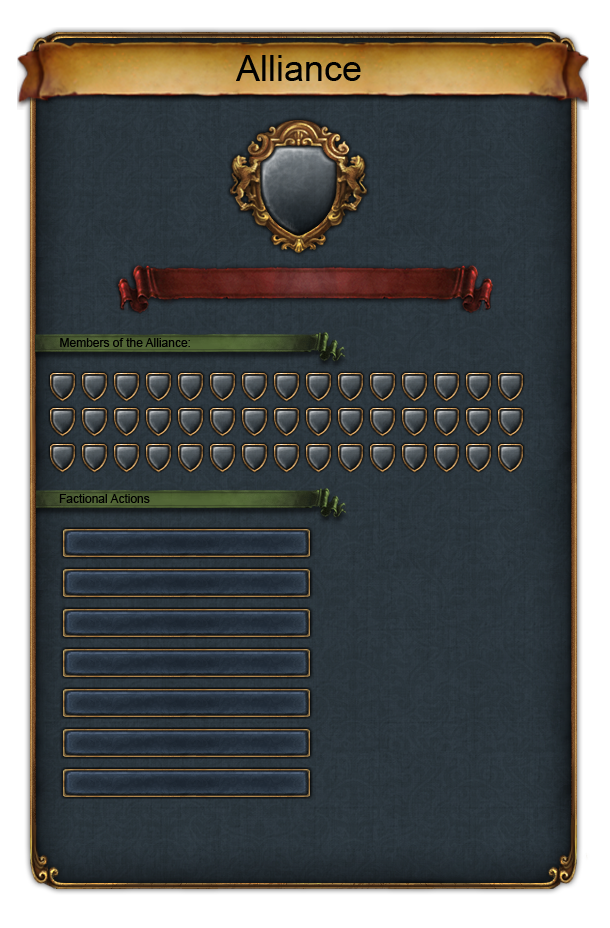
<style>
.page{position:relative;width:610px;height:928px}
.page>*{position:absolute;margin:0}
.t1{font:36px "ArialMT";color:#000000}
.t2{font:12px "ArialMT";color:#000000}
</style>
<div class="page">
<p class="t1" style="left:236px;top:55px;width:125px;height:26px">Alliance</p>
<p class="t2" style="left:60px;top:338px;width:130px;height:9px">Members of the Alliance:</p>
<p class="t2" style="left:59px;top:494px;width:91px;height:9px">Factional Actions</p>
</div>
